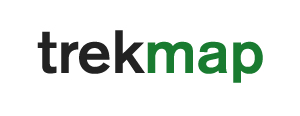
<style>
.page{position:relative;width:300px;height:116px;background:#ffffff}
.page>*{position:absolute;margin:0}
.t1{font:60px "ReznorBroken";letter-spacing:-0.01em;color:#222222}
.t2{font:60px "ReznorBroken";letter-spacing:-0.01em;color:#197b30}
</style>
<div class="page">
<p class="t1" style="left:37px;top:30px;width:226px;height:53px">TREK<span class="t2">MAP</span></p>
</div>
